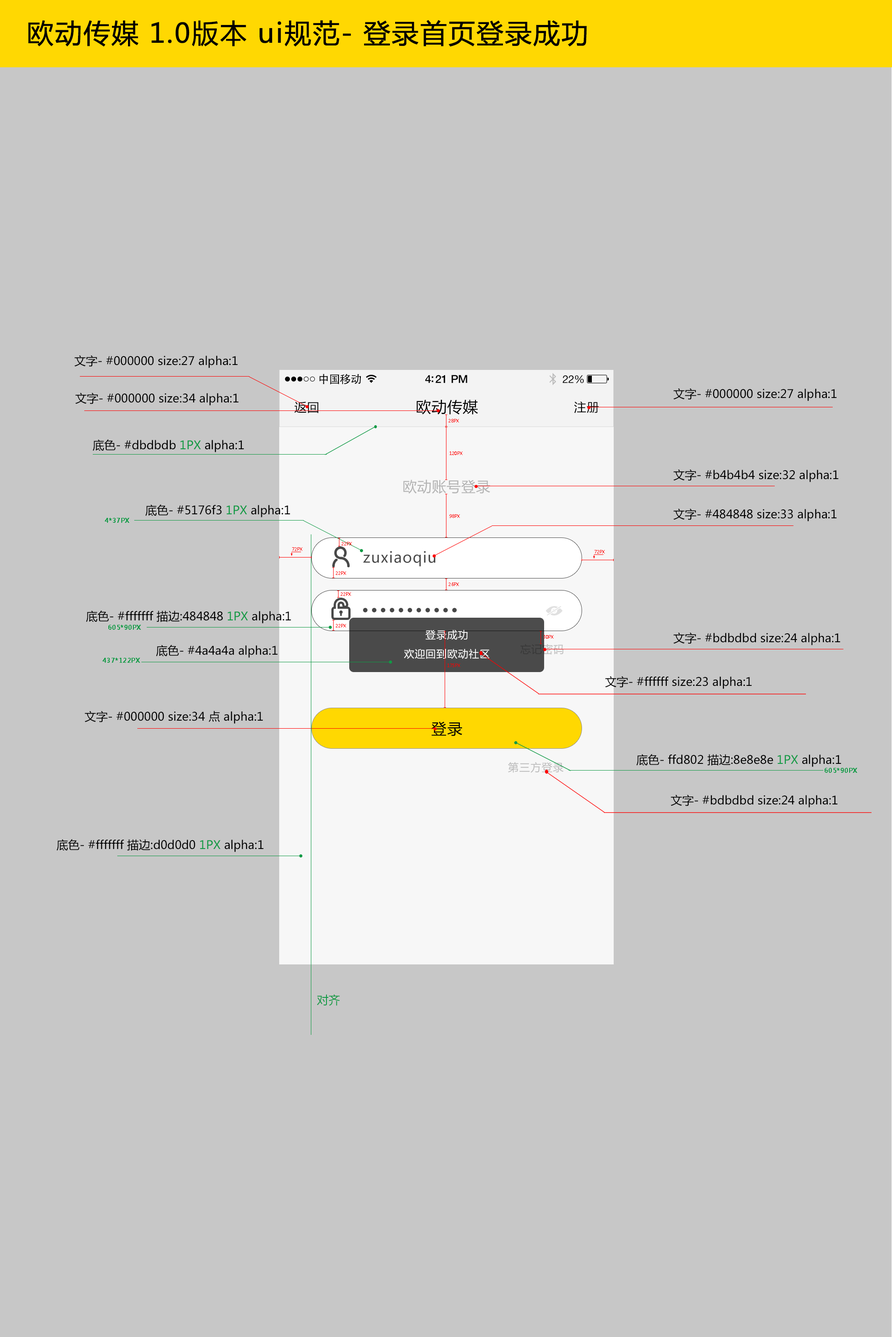
<style>
.page{position:relative;width:892px;height:1337px;background:#c7c7c7}
.page>*{position:absolute;margin:0}
.t1{font:26.7px "MicrosoftYaHei";letter-spacing:0.03em;color:#000000;font-weight:bold}
.t2{font:11.6px "MicrosoftYaHei";color:#000000}
.t3{font:4.4px "MicrosoftYaHei";color:#fe0000;scale:0.96 1}
.t4{font:11.6px "MicrosoftYaHei";color:#119a45}
.t5{font:6.7px "MicrosoftYaHei";color:#119a45;font-weight:bold;scale:0.96 1}
</style>
<div class="page">
<p class="t1" style="left:28px;top:20px;width:559px;height:27px">欧动传媒 1.0版本 ui规范- 登录首页登录成功</p>
<p class="t2" style="left:74px;top:355px;width:164px;height:13px">文字- #000000 size:27 alpha:1</p>
<p class="t2" style="left:673px;top:388px;width:163px;height:13px">文字- #000000 size:27 alpha:1</p>
<p class="t2" style="left:75px;top:393px;width:164px;height:13px">文字- #000000 size:34 alpha:1</p>
<p class="t3" style="left:448px;top:419px;width:11px;height:4px">28PX</p>
<p class="t2" style="left:93px;top:440px;width:151px;height:12px">底色- #dbdbdb <span class="t4">1PX</span> alpha:1</p>
<p class="t3" style="left:449px;top:452px;width:13px;height:3px">120PX</p>
<p class="t2" style="left:673px;top:469px;width:165px;height:13px">文字- #b4b4b4 size:32 alpha:1</p>
<p class="t2" style="left:145px;top:505px;width:145px;height:13px">底色- #5176f3 <span class="t4">1PX</span> alpha:1</p>
<p class="t2" style="left:673px;top:509px;width:163px;height:13px">文字- #484848 size:33 alpha:1</p>
<p class="t5" style="left:105px;top:518px;width:24px;height:5px">4*37PX</p>
<p class="t3" style="left:449px;top:514px;width:11px;height:4px">98PX</p>
<p class="t3" style="left:341px;top:542px;width:11px;height:4px">22PX</p>
<p class="t3" style="left:292px;top:547px;width:10px;height:4px">72PX</p>
<p class="t3" style="left:594px;top:550px;width:11px;height:4px">72PX</p>
<p class="t3" style="left:336px;top:572px;width:10px;height:3px">22PX</p>
<p class="t3" style="left:341px;top:592px;width:10px;height:4px">22PX</p>
<p class="t3" style="left:448px;top:583px;width:11px;height:3px">26PX</p>
<p class="t2" style="left:86px;top:611px;width:205px;height:13px">底色- #fffffff 描边:484848 <span class="t4">1PX</span> alpha:1</p>
<p class="t5" style="left:108px;top:625px;width:33px;height:5px">605*90PX</p>
<p class="t3" style="left:336px;top:624px;width:10px;height:4px">22PX</p>
<p class="t3" style="left:543px;top:635px;width:10px;height:4px">30PX</p>
<p class="t2" style="left:673px;top:633px;width:167px;height:13px">文字- #bdbdbd size:24 alpha:1</p>
<p class="t2" style="left:156px;top:645px;width:122px;height:13px">底色- #4a4a4a alpha:1</p>
<p class="t5" style="left:103px;top:658px;width:37px;height:5px">437*122PX</p>
<p class="t3" style="left:447px;top:664px;width:13px;height:3px">175PX</p>
<p class="t2" style="left:605px;top:676px;width:147px;height:13px">文字- #ffffff size:23 alpha:1</p>
<p class="t2" style="left:85px;top:711px;width:178px;height:13px">文字- #000000 size:34 点 alpha:1</p>
<p class="t2" style="left:636px;top:754px;width:205px;height:13px">底色- ffd802 描边:8e8e8e <span class="t4">1PX</span> alpha:1</p>
<p class="t5" style="left:824px;top:768px;width:33px;height:5px">605*90PX</p>
<p class="t2" style="left:670px;top:795px;width:167px;height:13px">文字- #bdbdbd size:24 alpha:1</p>
<p class="t2" style="left:57px;top:839px;width:206px;height:13px">底色- #fffffff 描边:d0d0d0 <span class="t4">1PX</span> alpha:1</p>
<p class="t4" style="left:317px;top:995px;width:23px;height:11px">对齐</p>
</div>
